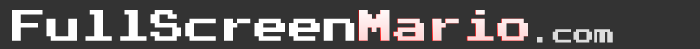
<style>
.page{position:relative;width:700px;height:49px;background:#333333}
.page>*{position:absolute;margin:0}
.t1{font:35px "PressStart2P";color:#ffffff}
.t2{font:35px "PressStart2P";color:#eeeeee}
.t3{font:21px "PressStart2P";color:#dddddd}
</style>
<div class="page">
<p class="t1" style="left:12px;top:10px;width:343px;height:31px">FullScreen</p>
<p class="t2" style="left:359px;top:10px;width:169px;height:31px">Mario</p>
<p class="t3" style="left:537px;top:29px;width:76px;height:14px">.com</p>
</div>
